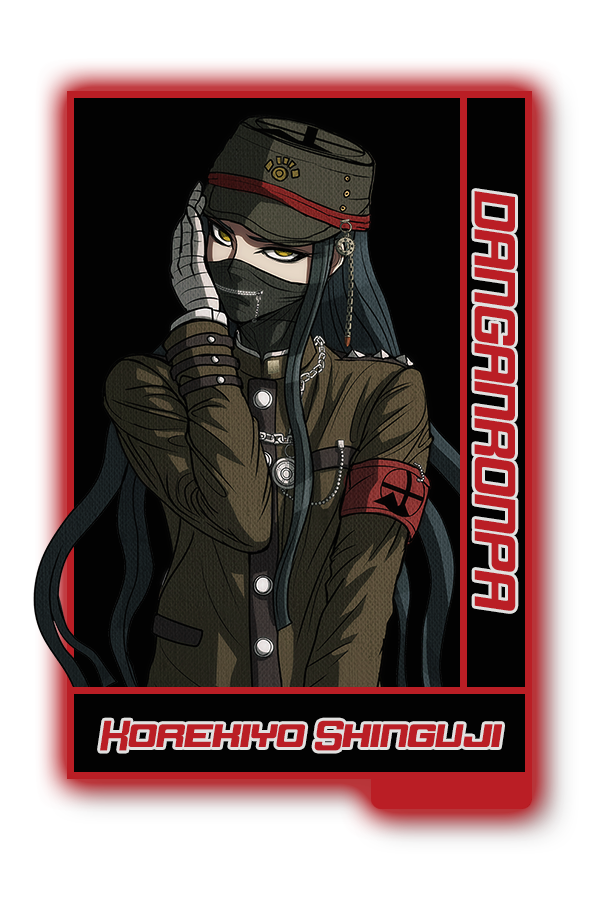
<style>
.page{position:relative;width:600px;height:900px;background:#020202}
.page>*{position:absolute;margin:0}
.t1{font:48.8px "DorBlue";color:#bb2c2e}
.t2{font:35.7px "DorBlue";color:#bb2c2e}
</style>
<div class="page">
<p class="t1" style="left:474px;top:191px;width:42px;height:420px;rotate:90deg">DANGANRONPA</p>
<p class="t2" style="left:100px;top:720px;width:402px;height:31px">Korekiyo Shinguji</p>
</div>
